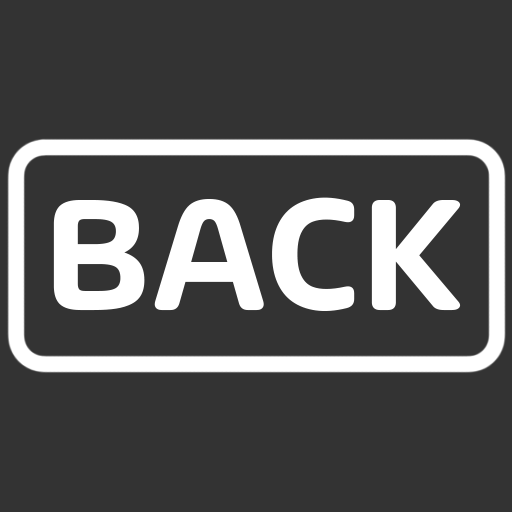
<style>
.page{position:relative;width:512px;height:512px;background:#333333}
.page>*{position:absolute;margin:0}
.t1{font:170px "Arlon-SemiBold";color:#ffffff}
</style>
<div class="page">
<p class="t1" style="left:53px;top:197px;width:408px;height:114px">BACK</p>
</div>
